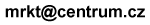
<style>
.page{position:relative;width:150px;height:25px;background:#ffffff}
.page>*{position:absolute;margin:0}
.t1{font:16.7px "Arial-BoldMT";color:#000000}
</style>
<div class="page">
<p class="t1" style="left:5px;top:5px;width:140px;height:17px">mrkt@centrum.cz</p>
</div>
